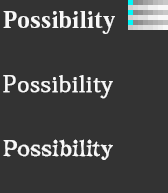
<style>
.page{position:relative;width:168px;height:193px;background:#333333}
.page>*{position:absolute;margin:0}
.t1{font:22px/64px "KozMinPro-Heavy";letter-spacing:0.022em;color:#f8f8f8}
.t2{font:22px/64px "AdobeFangsongStd-Regular";letter-spacing:0.028em;color:#f8f8f8;font-weight:bold}
.t3{font:22px/64px "ComicMysteryStd-DB";letter-spacing:-0.006em;color:#f8f8f8}
</style>
<div class="page">
<p class="t1" style="left:3px;top:11px;width:112px;height:149px">Possibility<span class="t2"><br>Possibility<br></span><span class="t3">Possibility</span></p>
</div>
